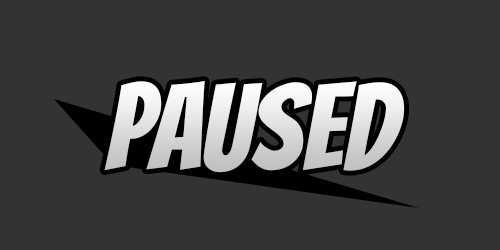
<style>
.page{position:relative;width:500px;height:250px;background:#333333}
.page>*{position:absolute;margin:0}
.t1{font:120px "Bangers-Regular"}
</style>
<div class="page">
<p class="t1" style="left:104px;top:81px;width:301px;height:92px">Paused</p>
</div>
